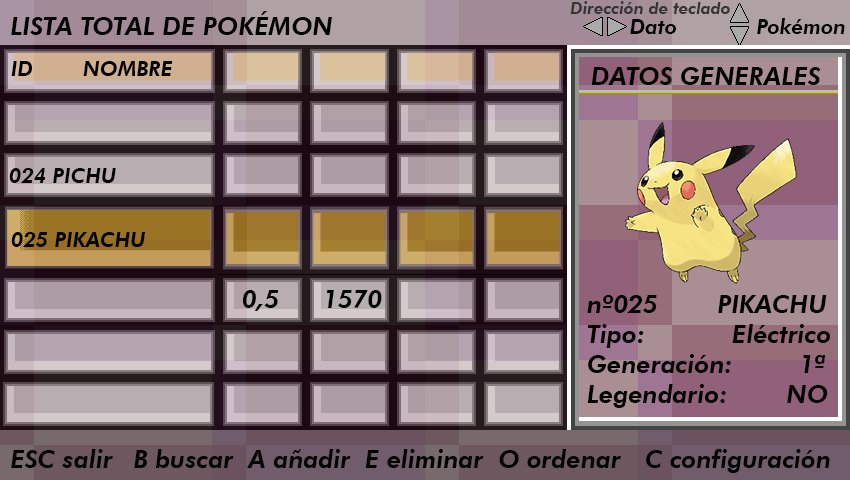
<style>
.page{position:relative;width:850px;height:480px}
.page>*{position:absolute;margin:0}
.t1{font:16.7px "FuturaBT-HeavyItalic";color:#343434}
.t2{font:25px "FuturaBT-HeavyItalic";color:#000000}
.t3{font:20.8px "FuturaBT-HeavyItalic";color:#000000}
</style>
<div class="page">
<p class="t1" style="left:570px;top:1px;width:160px;height:13px">Dirección de teclado</p>
<p class="t2" style="left:11px;top:11px;width:321px;height:24px">LISTA TOTAL DE POKÉMON</p>
<p class="t3" style="left:630px;top:18px;width:215px;height:16px">Dato     Pokémon</p>
<p class="t3" style="left:11px;top:61px;width:162px;height:15px">ID   NOMBRE</p>
<p class="t2" style="left:591px;top:67px;width:230px;height:18px">DATOS GENERALES</p>
<p class="t3" style="left:9px;top:168px;width:107px;height:15px">024 PICHU</p>
<p class="t3" style="left:11px;top:232px;width:135px;height:15px">025 PIKACHU</p>
<p class="t2" style="left:242px;top:290px;width:37px;height:21px">0,5</p>
<p class="t2" style="left:326px;top:290px;width:56px;height:18px">1570</p>
<p class="t2" style="left:587px;top:295px;width:243px;height:113px">nº025     PIKACHU<br>Tipo:        Eléctrico<br>Generación:         1ª<br>Legendario:        NO</p>
<p class="t2" style="left:11px;top:449px;width:819px;height:24px">ESC salir   B buscar  A añadir  E eliminar  O ordenar    C configuración</p>
</div>
